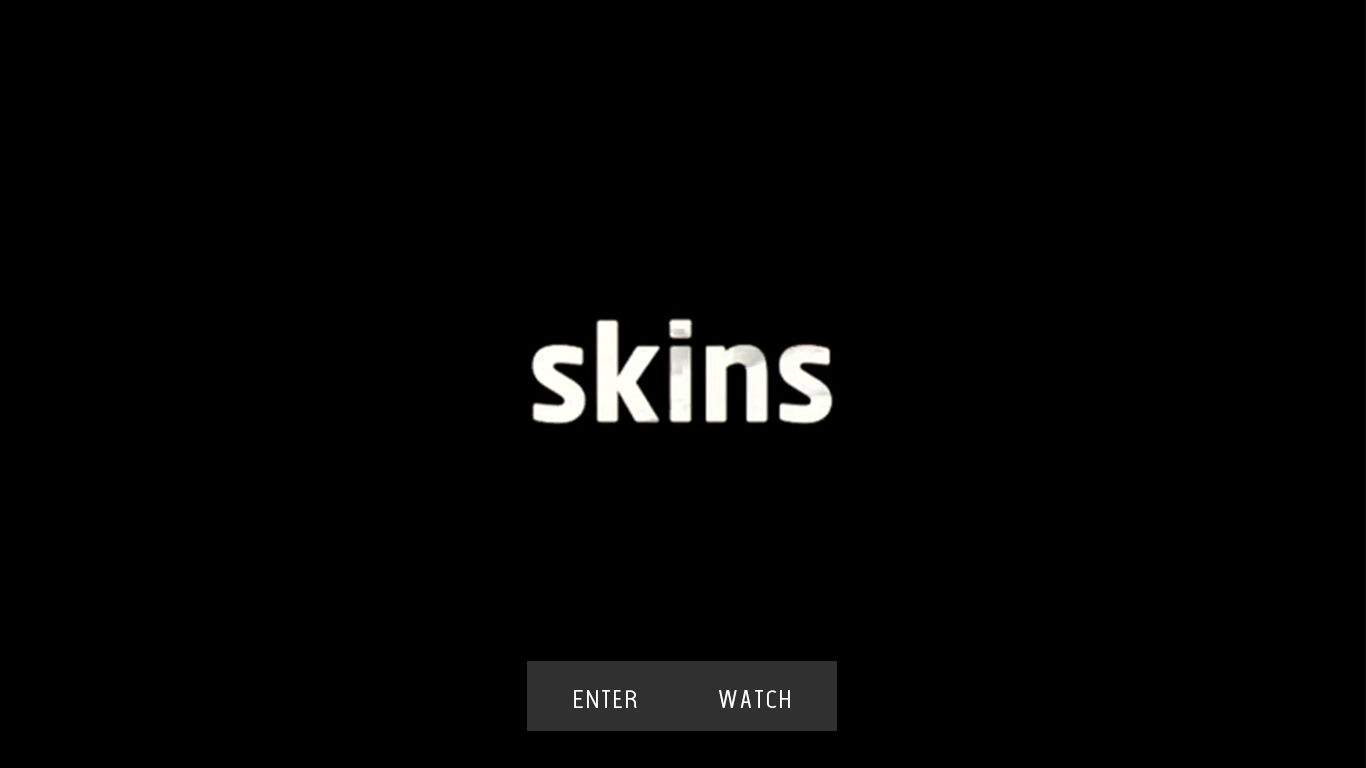
<style>
.page{position:relative;width:1366px;height:768px;background:#000000}
.page>*{position:absolute;margin:0}
.t1{font:24px "TheLightFont";color:#ffffff;scale:1.2 1}
</style>
<div class="page">
<p class="t1" style="left:574px;top:690px;width:216px;height:18px">Enter             watch</p>
</div>
